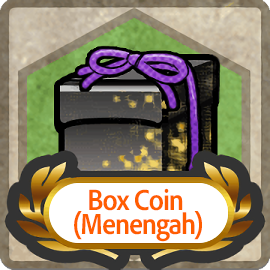
<style>
.page{position:relative;width:270px;height:270px}
.page>*{position:absolute;margin:0}
.t1{font:30px/24px "AdobeClean-Bold";letter-spacing:-0.04em;color:#ff5d00;scale:0.9 1}
</style>
<div class="page">
<p class="t1" style="left:74px;top:188px;width:128px;height:54px;text-align:center">Box Coin <br>(Menengah)</p>
</div>
